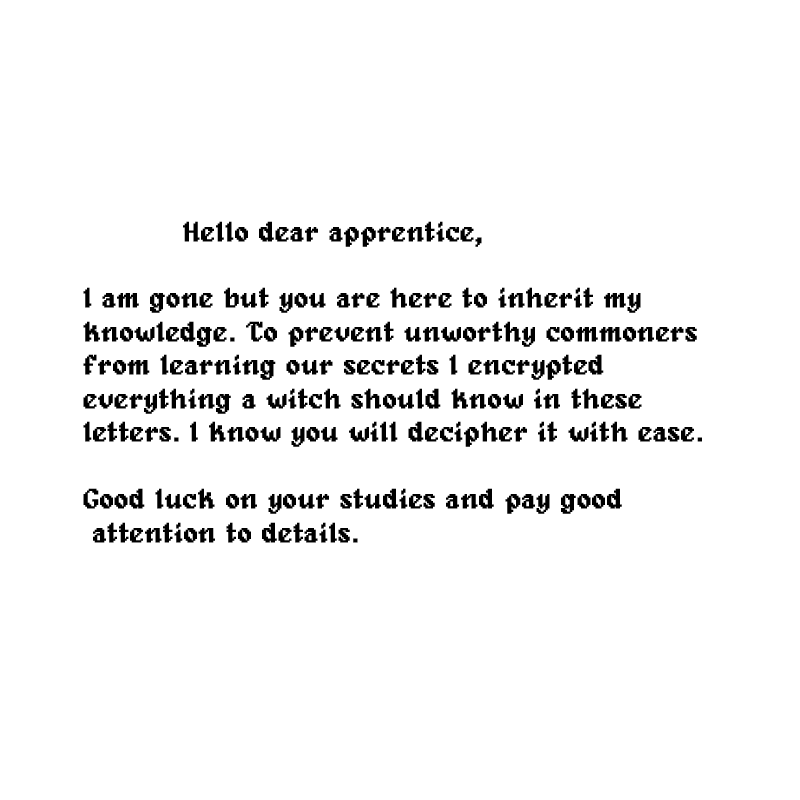
<style>
.page{position:relative;width:800px;height:800px;background:#ffffff}
.page>*{position:absolute;margin:0}
.t1{font:27.9px "Alagard";color:#000000;font-weight:bold}
</style>
<div class="page">
<p class="t1" style="left:83px;top:221px;width:619px;height:322px">Hello dear apprentice, <br><br>I am gone but you are here to inherit my <br>knowledge. To prevent unworthy commoners<br>from learning our secrets I encrypted <br>everything a witch should know in these<br>letters. I know you will decipher it with ease. <br><br>Good luck on your studies and pay good<br> attention to details.</p>
</div>
